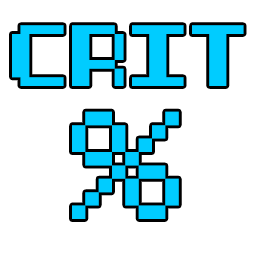
<style>
.page{position:relative;width:256px;height:256px;background:#ffffff}
.page>*{position:absolute;margin:0}
.t1{font:52px "8-bit-pusab";color:#00ccff}
.t2{font:80.4px "8-bit-pusab";color:#00ccff}
</style>
<div class="page">
<p class="t1" style="left:12px;top:25px;width:232px;height:61px">CRIT</p>
<p class="t2" style="left:72px;top:111px;width:107px;height:108px">%</p>
</div>
